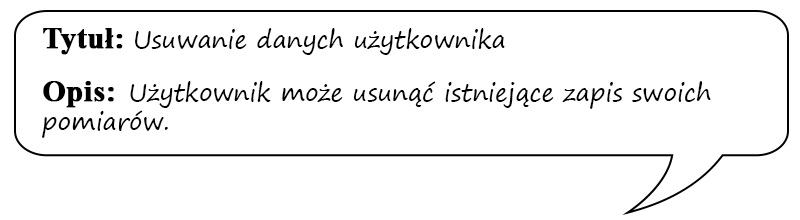
<style>
.page{position:relative;width:800px;height:220px;background:#ffffff}
.page>*{position:absolute;margin:0}
.t1{font:24px "SegoePrint";color:#000000}
.t2{font:30px "TimesNewRomanPS-BoldMT";color:#000000;font-weight:bold}
</style>
<div class="page">
<p class="t1" style="left:42px;top:28px;width:669px;height:110px"><span class="t2">Tytuł: </span>Usuwanie danych użytkownika<br><br><span class="t2">Opis:  </span>Użytkownik może usunąć istniejące zapis swoich pomiarów.</p>
</div>
